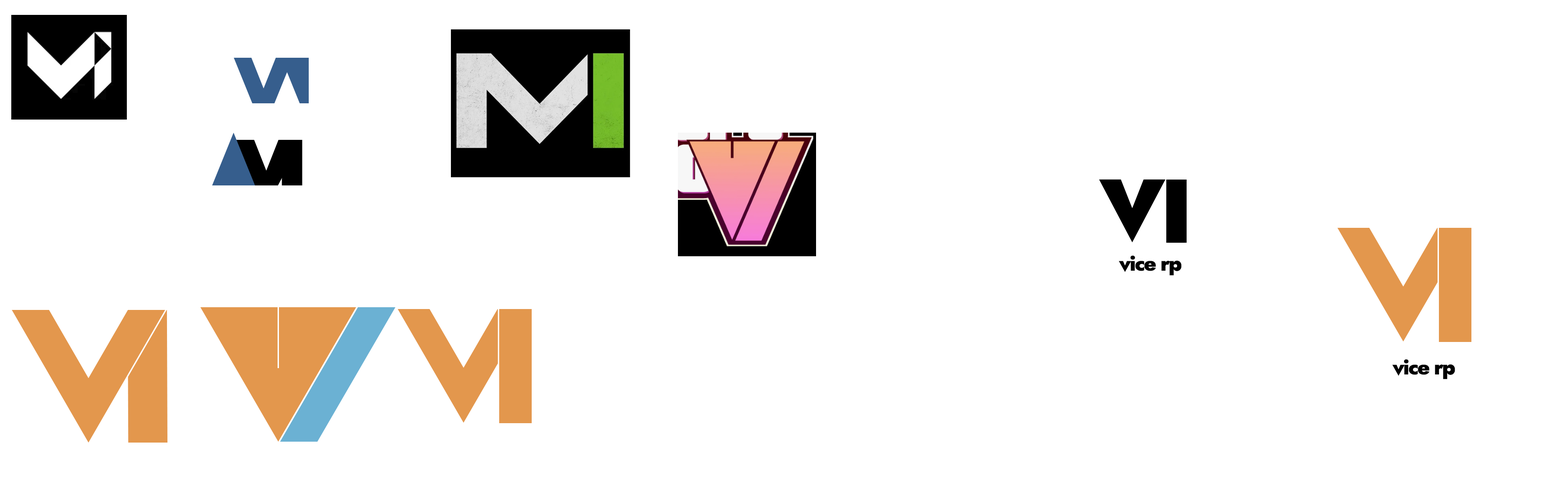
<style>
.page{position:relative;width:1568px;height:494px;background:#ffffff}
.page>*{position:absolute;margin:0}
.t1{font:84px "JostRoman-Black";letter-spacing:-0.06em;color:#000000}
.t2{font:90.3px "JostRoman-Black";letter-spacing:-0.05em;color:#000000}
.t3{font:21px "JostRoman-Black";letter-spacing:-0.06em;color:#000000}
</style>
<div class="page">
<p class="t1" style="left:1099px;top:179px;width:88px;height:64px">V<span class="t2">I</span></p>
<p class="t3" style="left:1118px;top:255px;width:64px;height:21px">vice rp</p>
<p class="t3" style="left:1392px;top:359px;width:63px;height:21px">vice rp</p>
</div>
